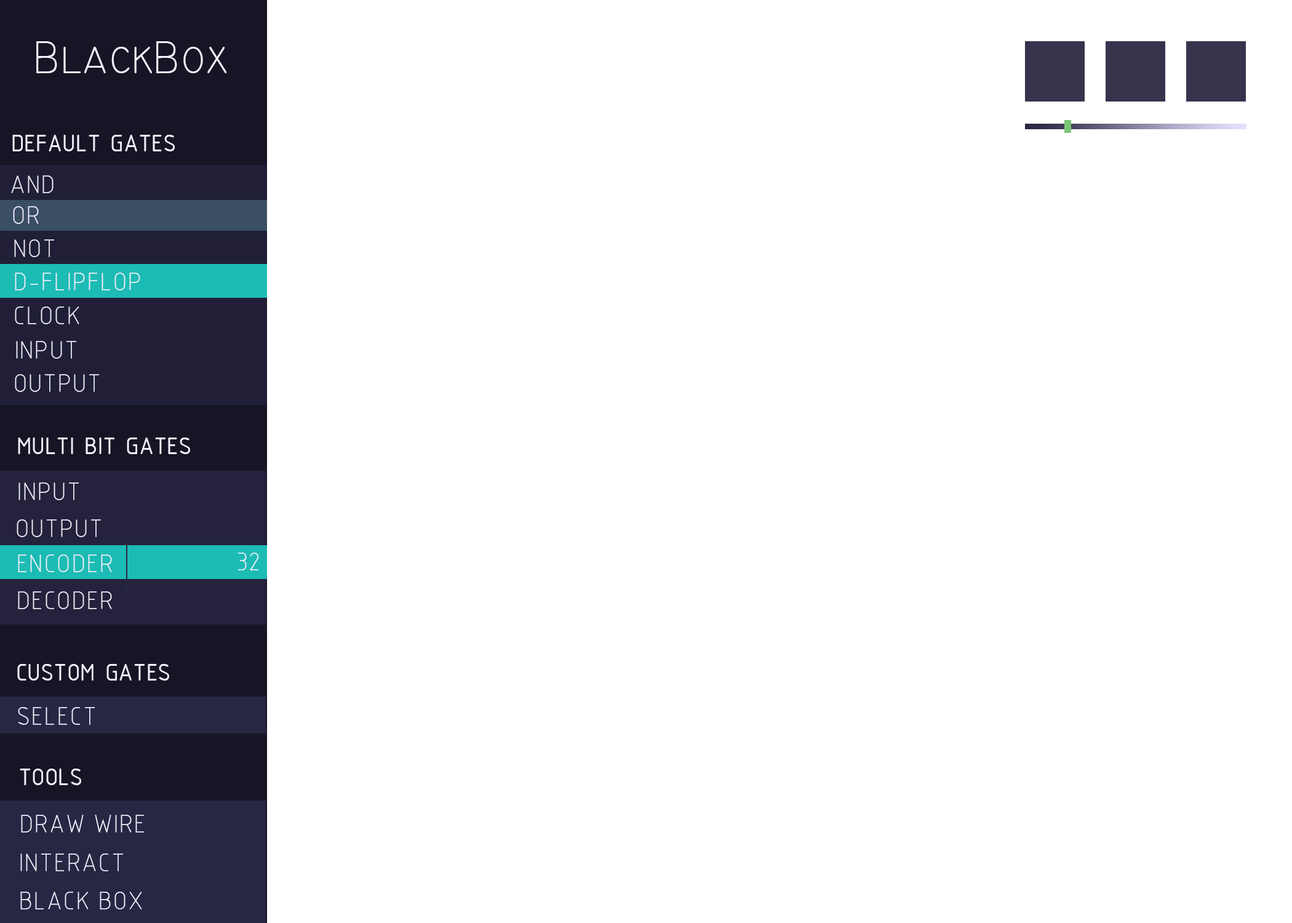
<style>
.page{position:relative;width:1292px;height:923px;background:#ffffff}
.page>*{position:absolute;margin:0}
.t1{font:46.1px "TechnicLite";color:#f2f1fe}
.t2{font:25.6px "ISOCPEUR";color:#f2f1fe}
.t3{font:25.6px "ISOCP_IV25";color:#f2f1fe}
</style>
<div class="page">
<p class="t1" style="left:36px;top:41px;width:191px;height:32px">BlackBox</p>
<p class="t2" style="left:12px;top:135px;width:163px;height:16px">DEFAULT GATES</p>
<p class="t3" style="left:11px;top:175px;width:43px;height:18px">AND</p>
<p class="t3" style="left:13px;top:206px;width:26px;height:18px">OR</p>
<p class="t3" style="left:14px;top:239px;width:40px;height:18px">NOT</p>
<p class="t3" style="left:15px;top:273px;width:125px;height:17px">D-FLIPFLOP</p>
<p class="t3" style="left:15px;top:306px;width:64px;height:18px">CLOCK</p>
<p class="t3" style="left:16px;top:341px;width:60px;height:18px">INPUT</p>
<p class="t3" style="left:15px;top:374px;width:84px;height:18px">OUTPUT</p>
<p class="t2" style="left:18px;top:437px;width:172px;height:17px">MULTI BIT GATES</p>
<p class="t3" style="left:18px;top:482px;width:61px;height:18px">INPUT</p>
<p class="t3" style="left:17px;top:519px;width:84px;height:18px">OUTPUT</p>
<p class="t3" style="left:18px;top:554px;width:94px;height:18px">ENCODER</p>
<p class="t3" style="left:238px;top:553px;width:21px;height:17px">32</p>
<p class="t3" style="left:18px;top:591px;width:94px;height:18px">DECODER</p>
<p class="t2" style="left:17px;top:664px;width:152px;height:16px">CUSTOM GATES</p>
<p class="t3" style="left:18px;top:707px;width:77px;height:18px">SELECT</p>
<p class="t2" style="left:20px;top:768px;width:61px;height:17px">TOOLS</p>
<p class="t3" style="left:21px;top:815px;width:123px;height:17px">DRAW WIRE</p>
<p class="t3" style="left:20px;top:853px;width:103px;height:18px">INTERACT</p>
<p class="t3" style="left:20px;top:892px;width:122px;height:17px">BLACK BOX</p>
</div>
